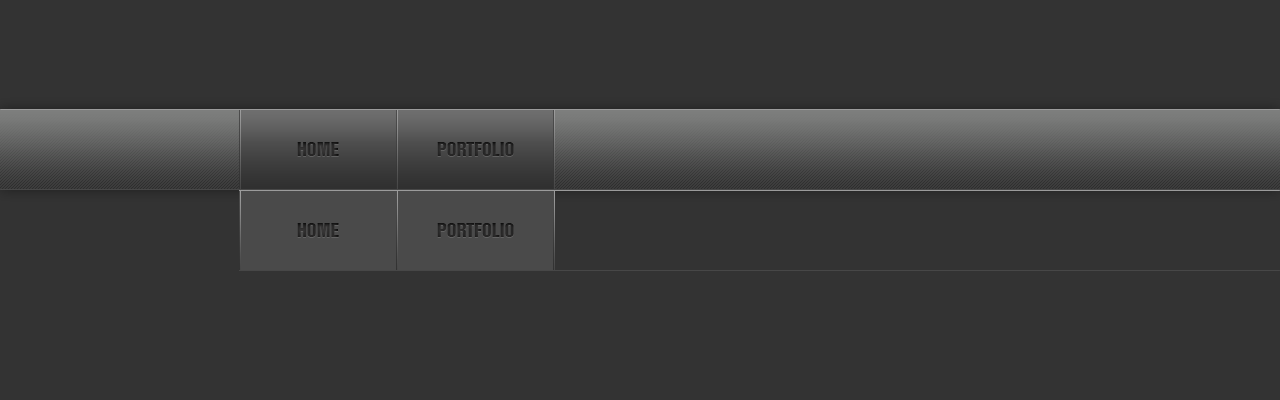
<style>
.page{position:relative;width:1280px;height:400px;background:#333333}
.page>*{position:absolute;margin:0}
.t1{font:18px "HelveticaInseratLT-Roman";color:#292828}
.t2{font:18px "HelveticaInseratLT-Roman";color:#272626}
</style>
<div class="page">
<p class="t1" style="left:297px;top:142px;width:42px;height:14px">HOME</p>
<p class="t2" style="left:437px;top:142px;width:77px;height:14px">PORTFOLIO</p>
<p class="t1" style="left:297px;top:223px;width:42px;height:14px">HOME</p>
<p class="t2" style="left:437px;top:223px;width:77px;height:14px">PORTFOLIO</p>
</div>
